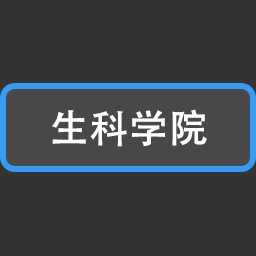
<style>
.page{position:relative;width:256px;height:256px;background:#333333}
.page>*{position:absolute;margin:0}
.t1{font:39px "AdobeHeitiStd-Regular";color:#ffffff;font-weight:bold}
</style>
<div class="page">
<p class="t1" style="left:52px;top:109px;width:155px;height:38px">生科学院</p>
</div>
